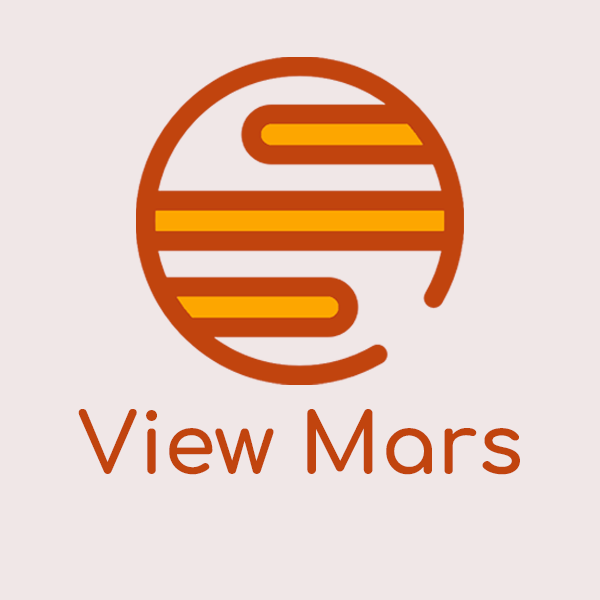
<style>
.page{position:relative;width:600px;height:600px;background:#f0e7e7}
.page>*{position:absolute;margin:0}
.t1{font:83.3px "Comfortaa-Bold";color:#c1440e}
</style>
<div class="page">
<p class="t1" style="left:78px;top:409px;width:442px;height:66px">View Mars</p>
</div>
